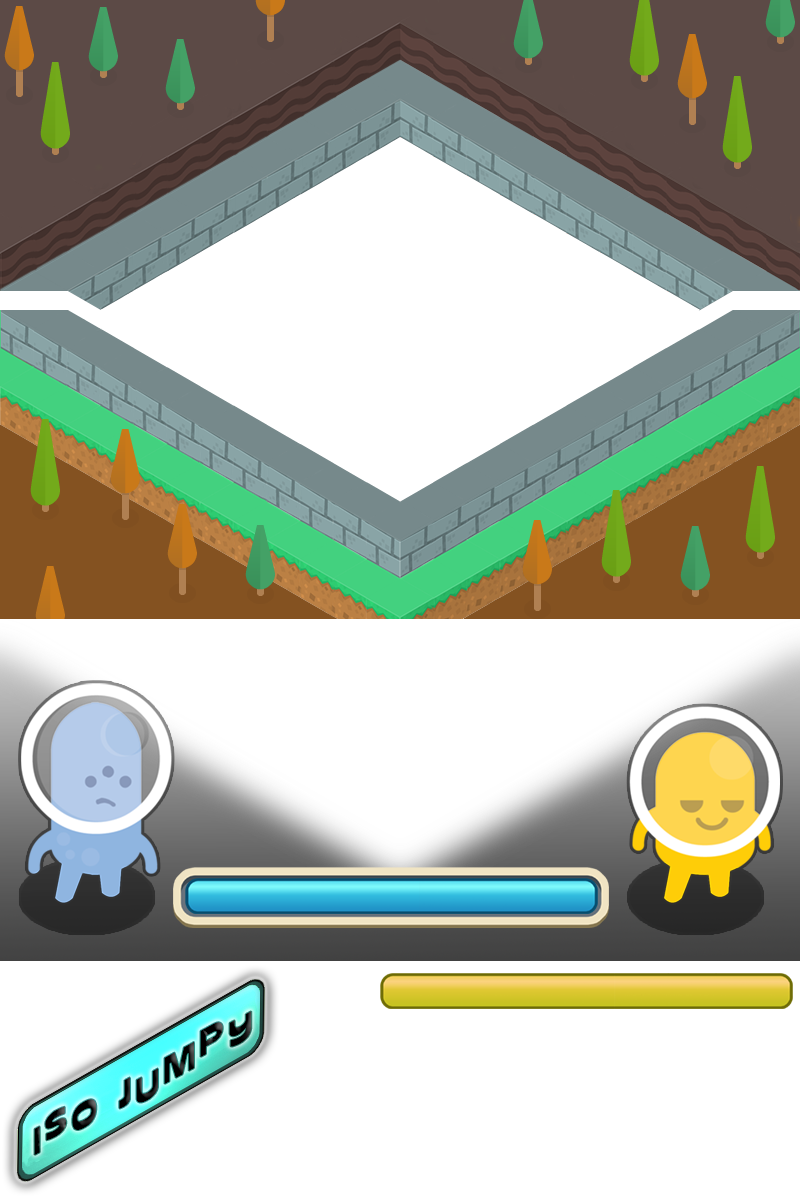
<style>
.page{position:relative;width:800px;height:1200px;background:#ffffff}
.page>*{position:absolute;margin:0}
.t1{font:36px "Glockenspiel";letter-spacing:0.1em;color:#000000;scale:1.14 1}
</style>
<div class="page">
<p class="t1" style="left:34px;top:1011px;width:218px;height:144px;rotate:-29deg">ISO JUMPY</p>
</div>
